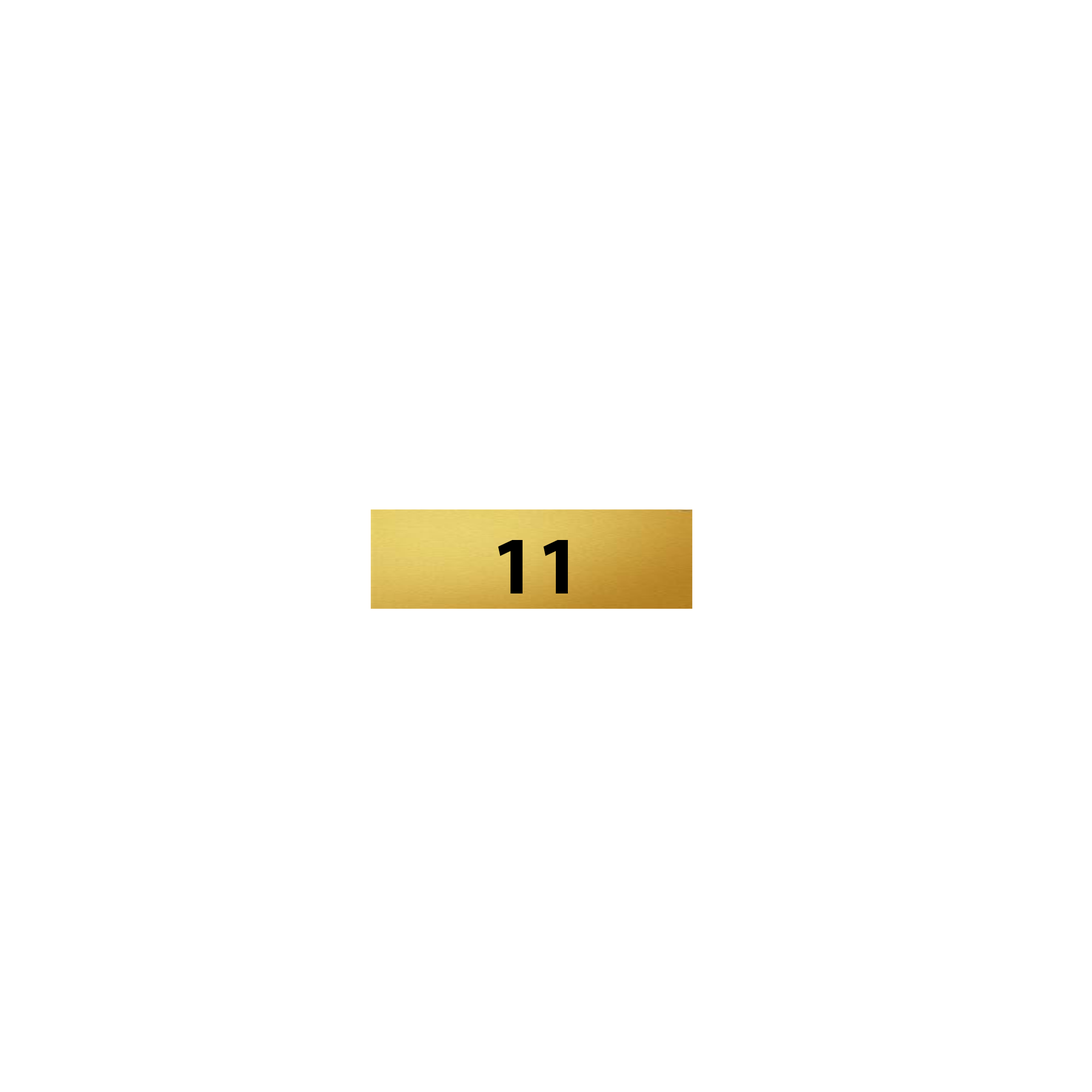
<style>
.page{position:relative;width:1092px;height:1092px;background:#ffffff}
.page>*{position:absolute;margin:0}
.t1{font:81.9px "MyriadPro-Bold";color:#000000}
</style>
<div class="page">
<p class="t1" style="left:498px;top:540px;width:70px;height:53px">11</p>
</div>
